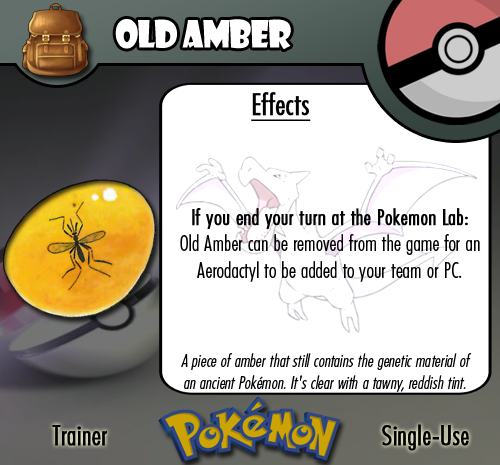
<style>
.page{position:relative;width:500px;height:465px;background:#ffffff}
.page>*{position:absolute;margin:0}
.t1{font:36.7px "ShowcardGothic-Reg";letter-spacing:-0.025em;color:#ffffff;scale:0.91 1}
.t2{font:22.2px "FuturaCondensedBQ-Light";color:#010101}
.t3{font:27.8px "FuturaCondensedBQ-Light";color:#010101;font-weight:bold}
.t4{font:30.6px "FuturaCondensedBQ-Light";color:#010101;font-weight:bold;text-decoration:underline}
.t5{font:22.2px "FuturaCondensedBQ-Light";color:#010101;font-weight:bold}
.t6{font:18.1px "FuturaCondensedBQ-Light";color:#010101;font-style:italic}
</style>
<div class="page">
<p class="t1" style="left:115px;top:19px;width:176px;height:31px">Old Amber</p>
<p class="t2" style="left:180px;top:92px;width:300px;height:190px"><span class="t3">  </span><span class="t4">Effects<br><br><br><br><br><br><br></span><span class="t5">If you end your turn at the Pokemon Lab: </span>Old Amber can be removed from the game for an Aerodactyl to be added to your team or PC.</p>
<p class="t6" style="left:181px;top:353px;width:291px;height:39px;text-align:center">A piece of amber that still contains the genetic material of an ancient Pokémon. It's clear with a tawny, reddish tint.</p>
<p class="t3" style="left:52px;top:425px;width:55px;height:21px">Trainer</p>
<p class="t3" style="left:382px;top:424px;width:87px;height:27px">Single-Use</p>
</div>
